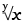
<style>
.page{position:relative;width:24px;height:24px;background:#ffffff}
.page>*{position:absolute;margin:0}
.t1{font:24px "Gabriola";color:#000000}
</style>
<div class="page">
<p class="t1" style="left:2px;top:4px;width:6px;height:8px">y</p>
<p class="t1" style="left:11px;top:12px;width:11px;height:8px">x</p>
</div>
